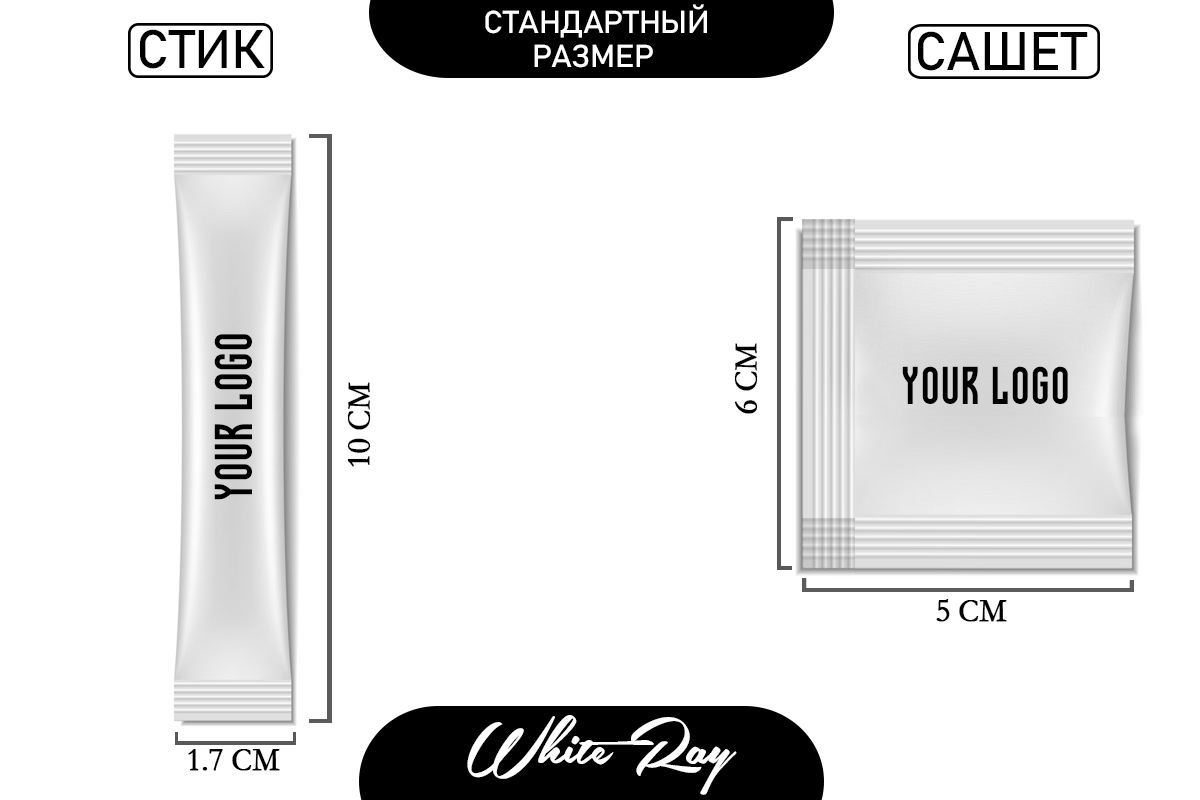
<style>
.page{position:relative;width:1200px;height:800px;background:#ffffff}
.page>*{position:absolute;margin:0}
.t1{font:31.1px "Bahnschrift";letter-spacing:-0.008em;color:#ffffff;text-transform:uppercase;scale:1.04 1}
.t2{font:53.6px "Bahnschrift";letter-spacing:-0.008em;color:#000000;text-transform:uppercase}
.t3{font:53.3px "MolodofontRegular";letter-spacing:-0.008em;color:#000000;text-transform:uppercase}
.t4{font:33px "Garamond";letter-spacing:-0.028em;color:#000000;text-transform:uppercase;font-weight:bold}
.t5{font:32.7px "Garamond";letter-spacing:-0.028em;color:#000000;text-transform:uppercase;font-weight:bold}
.t6{font:86.4px "SouthernAirePersonalUseOnly";letter-spacing:-0.008em;color:#ffffff;scale:0.92 1}
</style>
<div class="page">
<p class="t1" style="left:485px;top:4px;width:222px;height:34px">стандартный</p>
<p class="t2" style="left:140px;top:29px;width:125px;height:40px">стик</p>
<p class="t2" style="left:918px;top:31px;width:170px;height:40px">сашет</p>
<p class="t1" style="left:534px;top:44px;width:119px;height:24px">размер</p>
<p class="t3" style="left:214px;top:334px;width:38px;height:166px;rotate:-90deg">your logo</p>
<p class="t4" style="left:734px;top:343px;width:24px;height:71px;rotate:-90deg">6 см</p>
<p class="t3" style="left:902px;top:366px;width:166px;height:38px">your logo</p>
<p class="t4" style="left:347px;top:382px;width:24px;height:85px;rotate:-90deg">10 см</p>
<p class="t5" style="left:936px;top:599px;width:71px;height:23px">5 см</p>
<p class="t6" style="left:467px;top:715px;width:270px;height:80px">White Ray</p>
<p class="t4" style="left:188px;top:749px;width:92px;height:22px">1.7 см</p>
</div>
